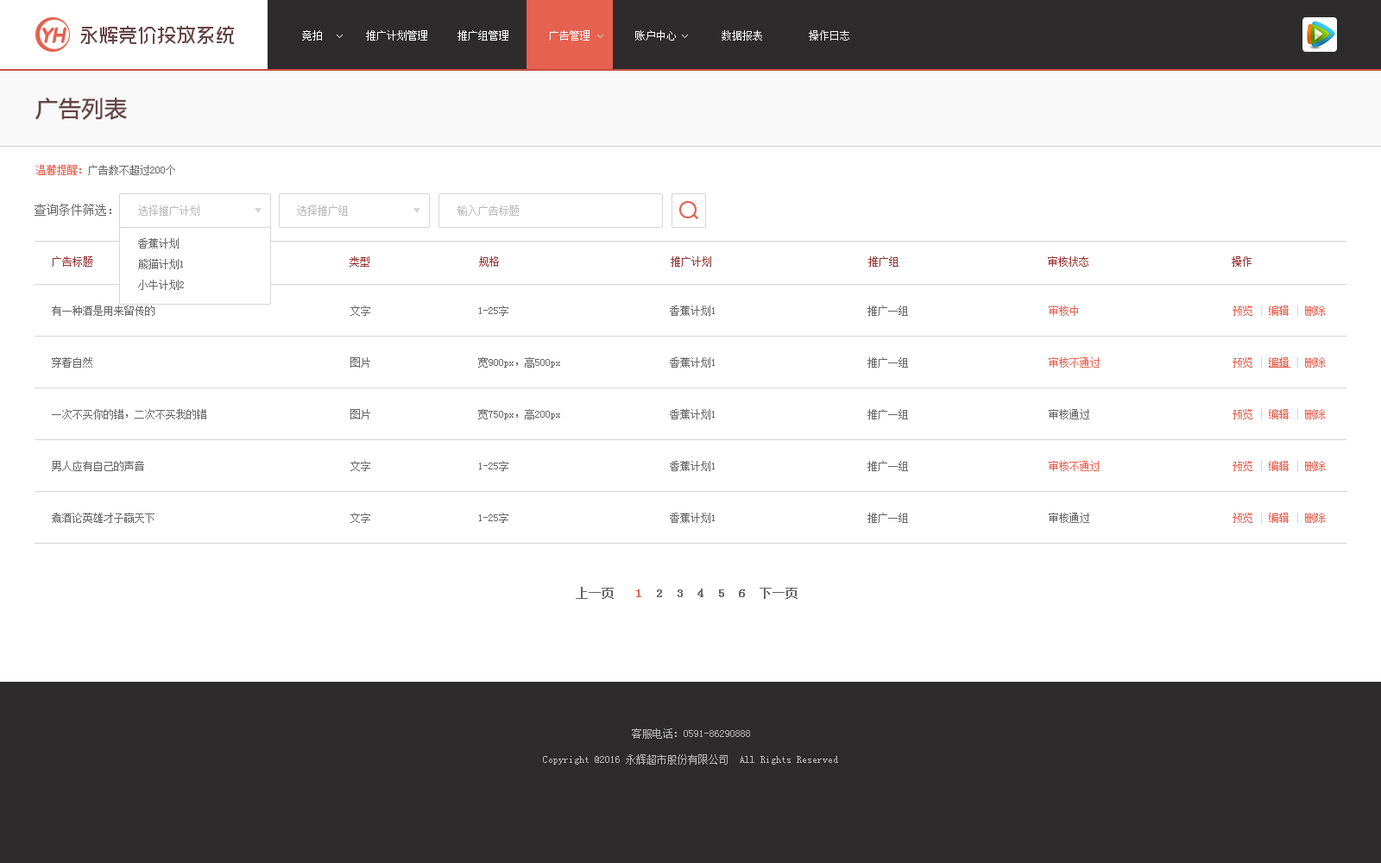
<style>
.page{position:relative;width:1381px;height:863px;background:#ffffff}
.page>*{position:absolute;margin:0}
.t1{font:10.4px "SimSun";color:#ffffff}
.t2{font:10.4px "SimSun";color:#f8f8f8}
.t3{font:22.4px "MicrosoftYaHei";color:#664545;font-weight:bold}
.t4{font:10.4px "SimSun";color:#666666}
.t5{font:10.4px "SimSun";color:#e6614f}
.t6{font:12.1px "SimSun";color:#666666}
.t7{font:10.4px "SimSun";color:#bababa}
.t8{font:10.4px/20.7px "SimSun";color:#666666}
.t9{font:10.4px "SimSun";color:#953232}
.t10{font:10.4px "SimSun";color:#d5d5d5}
.t11{font:10.4px "SimSun";color:#e6614f;text-decoration:underline}
.t12{font:12.1px "SimSun";color:#666666;font-weight:bold}
.t13{font:12.1px "SimSun";color:#e6614f;font-weight:bold}
</style>
<div class="page">
<p class="t1" style="left:302px;top:30px;width:20px;height:11px">竞拍</p>
<p class="t1" style="left:366px;top:30px;width:61px;height:11px">推广计划管理</p>
<p class="t1" style="left:458px;top:30px;width:50px;height:11px">推广组管理</p>
<p class="t1" style="left:549px;top:30px;width:41px;height:11px">广告管理</p>
<p class="t1" style="left:635px;top:30px;width:41px;height:11px">账户中心</p>
<p class="t2" style="left:722px;top:30px;width:40px;height:11px">数据报表</p>
<p class="t2" style="left:809px;top:30px;width:40px;height:11px">操作日志</p>
<p class="t3" style="left:35px;top:98px;width:92px;height:22px">广告列表</p>
<p class="t4" style="left:36px;top:165px;width:139px;height:10px"><span class="t5">温馨提醒：</span>广告数不超过200个</p>
<p class="t6" style="left:35px;top:204px;width:76px;height:12px">查询条件筛选：</p>
<p class="t7" style="left:138px;top:205px;width:61px;height:11px">选择推广计划</p>
<p class="t7" style="left:297px;top:205px;width:51px;height:11px">选择推广组</p>
<p class="t7" style="left:458px;top:205px;width:61px;height:11px">输入广告标题</p>
<p class="t8" style="left:138px;top:238px;width:46px;height:52px">香蕉计划<br>熊猫计划1<br>小牛计划2</p>
<p class="t9" style="left:52px;top:256px;width:40px;height:11px">广告标题</p>
<p class="t9" style="left:350px;top:256px;width:19px;height:11px">类型</p>
<p class="t9" style="left:479px;top:256px;width:20px;height:11px">规格</p>
<p class="t9" style="left:671px;top:256px;width:40px;height:11px">推广计划</p>
<p class="t9" style="left:868px;top:256px;width:31px;height:11px">推广组</p>
<p class="t9" style="left:1048px;top:256px;width:41px;height:11px">审核状态</p>
<p class="t9" style="left:1232px;top:256px;width:20px;height:11px">操作</p>
<p class="t4" style="left:52px;top:306px;width:103px;height:10px">有一种酒是用来留传的</p>
<p class="t4" style="left:350px;top:306px;width:20px;height:10px">文字</p>
<p class="t4" style="left:479px;top:306px;width:29px;height:10px">1-25字</p>
<p class="t4" style="left:670px;top:306px;width:45px;height:10px">香蕉计划1</p>
<p class="t4" style="left:868px;top:306px;width:40px;height:10px">推广一组</p>
<p class="t5" style="left:1049px;top:306px;width:29px;height:10px">审核中</p>
<p class="t5" style="left:1233px;top:306px;width:92px;height:10px">预览 <span class="t10">| </span>编辑 <span class="t10">| </span>删除</p>
<p class="t4" style="left:52px;top:357px;width:40px;height:11px">穿着自然</p>
<p class="t4" style="left:350px;top:357px;width:20px;height:11px">图片</p>
<p class="t4" style="left:478px;top:357px;width:82px;height:11px">宽900px，高500px</p>
<p class="t4" style="left:670px;top:357px;width:45px;height:11px">香蕉计划1</p>
<p class="t4" style="left:868px;top:357px;width:40px;height:11px">推广一组</p>
<p class="t5" style="left:1049px;top:357px;width:51px;height:11px">审核不通过</p>
<p class="t5" style="left:1233px;top:357px;width:92px;height:11px">预览 <span class="t10">| </span><span class="t11">编辑 </span><span class="t10">| </span>删除</p>
<p class="t4" style="left:52px;top:409px;width:154px;height:11px">一次不买你的错，二次不买我的错</p>
<p class="t4" style="left:350px;top:409px;width:20px;height:11px">图片</p>
<p class="t4" style="left:478px;top:409px;width:82px;height:11px">宽750px，高200px</p>
<p class="t4" style="left:670px;top:409px;width:45px;height:11px">香蕉计划1</p>
<p class="t4" style="left:868px;top:409px;width:40px;height:11px">推广一组</p>
<p class="t4" style="left:1049px;top:409px;width:40px;height:11px">审核通过</p>
<p class="t5" style="left:1233px;top:409px;width:92px;height:11px">预览 <span class="t10">| </span>编辑 <span class="t10">| </span>删除</p>
<p class="t4" style="left:52px;top:461px;width:92px;height:10px">男人应有自己的声音</p>
<p class="t4" style="left:350px;top:461px;width:20px;height:10px">文字</p>
<p class="t4" style="left:479px;top:461px;width:29px;height:10px">1-25字</p>
<p class="t4" style="left:670px;top:461px;width:45px;height:10px">香蕉计划1</p>
<p class="t4" style="left:868px;top:461px;width:40px;height:10px">推广一组</p>
<p class="t5" style="left:1049px;top:461px;width:51px;height:10px">审核不通过</p>
<p class="t5" style="left:1233px;top:461px;width:92px;height:10px">预览 <span class="t10">| </span>编辑 <span class="t10">| </span>删除</p>
<p class="t4" style="left:52px;top:513px;width:103px;height:10px">煮酒论英雄才子赢天下</p>
<p class="t4" style="left:350px;top:513px;width:20px;height:10px">文字</p>
<p class="t4" style="left:479px;top:513px;width:29px;height:10px">1-25字</p>
<p class="t4" style="left:670px;top:513px;width:45px;height:10px">香蕉计划1</p>
<p class="t4" style="left:868px;top:513px;width:40px;height:10px">推广一组</p>
<p class="t4" style="left:1049px;top:513px;width:40px;height:10px">审核通过</p>
<p class="t5" style="left:1233px;top:513px;width:92px;height:10px">预览 <span class="t10">| </span>编辑 <span class="t10">| </span>删除</p>
<p class="t12" style="left:576px;top:587px;width:222px;height:12px">上一页   <span class="t13">1  </span>2  3  4  5  6  下一页</p>
<p class="t7" style="left:632px;top:729px;width:118px;height:10px">客服电话：0591-86290888</p>
<p class="t7" style="left:543px;top:755px;width:295px;height:10px">Copyright @2016 永辉超市股份有限公司  All Rights Reserved</p>
</div>
